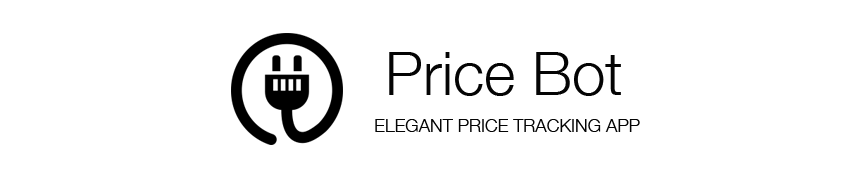
<style>
.page{position:relative;width:850px;height:180px;background:#ffffff}
.page>*{position:absolute;margin:0}
.t1{font:60px "HelveticaNeue-Light";color:#040404}
.t2{font:18px "HelveticaNeue-Light";color:#040404}
</style>
<div class="page">
<p class="t1" style="left:389px;top:52px;width:232px;height:44px">Price Bot</p>
<p class="t2" style="left:375px;top:119px;width:265px;height:13px">ELEGANT PRICE TRACKING APP</p>
</div>
